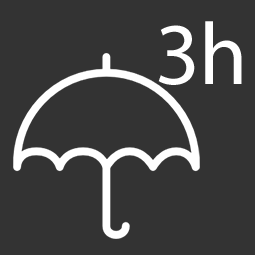
<style>
.page{position:relative;width:255px;height:255px;background:#333333}
.page>*{position:absolute;margin:0}
.t1{font:88.5px "MyriadPro-Regular";letter-spacing:-0.01em;color:#ffffff}
</style>
<div class="page">
<p class="t1" style="left:158px;top:21px;width:84px;height:64px">3h</p>
</div>
